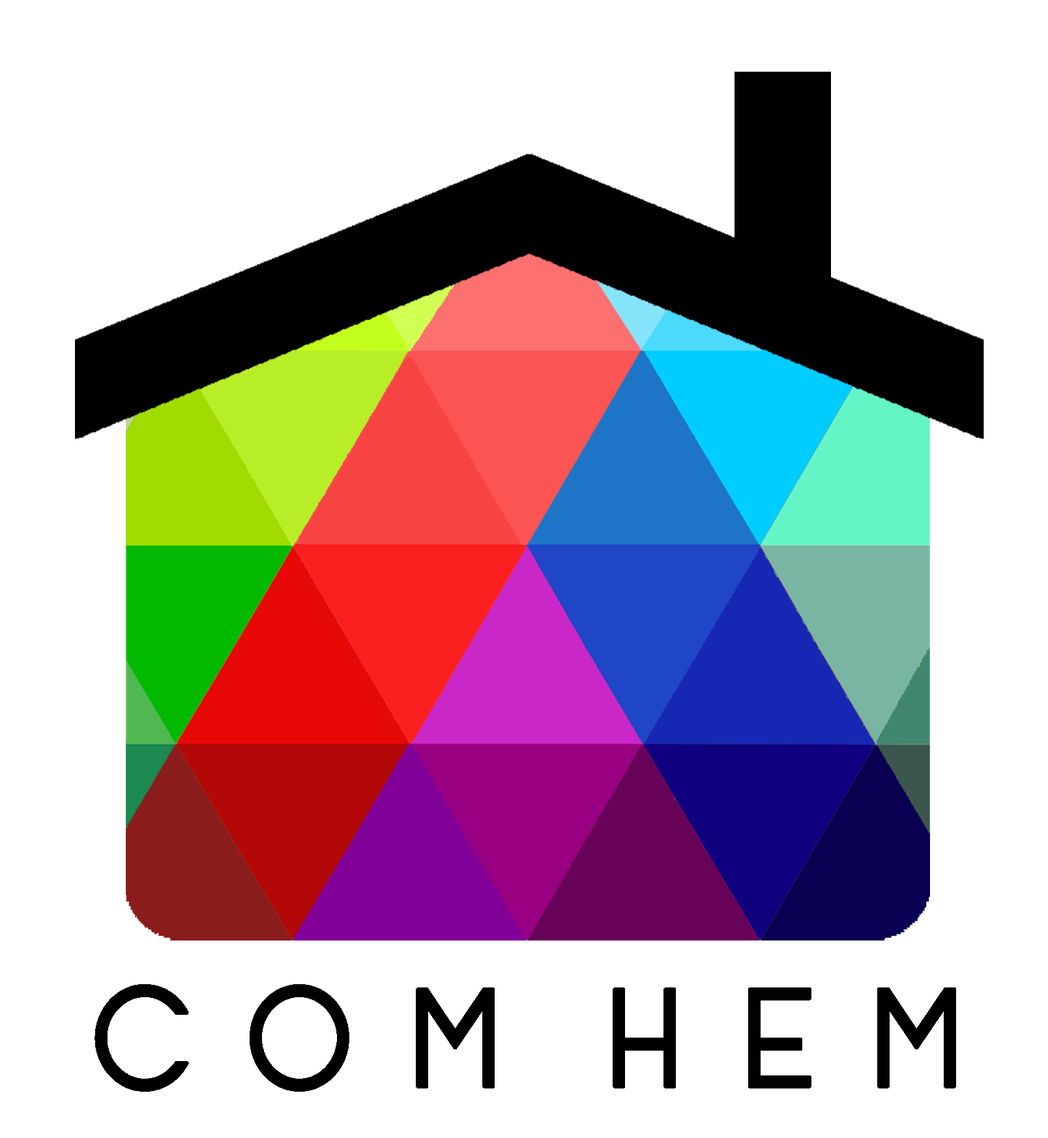
<style>
.page{position:relative;width:1048px;height:1138px;background:#ffffff}
.page>*{position:absolute;margin:0}
.t1{font:139.4px "Opificio-Regular";color:#000000;font-weight:bold;scale:0.92 1}
</style>
<div class="page">
<p class="t1" style="left:94px;top:984px;width:862px;height:108px">C O M  H E M</p>
</div>
